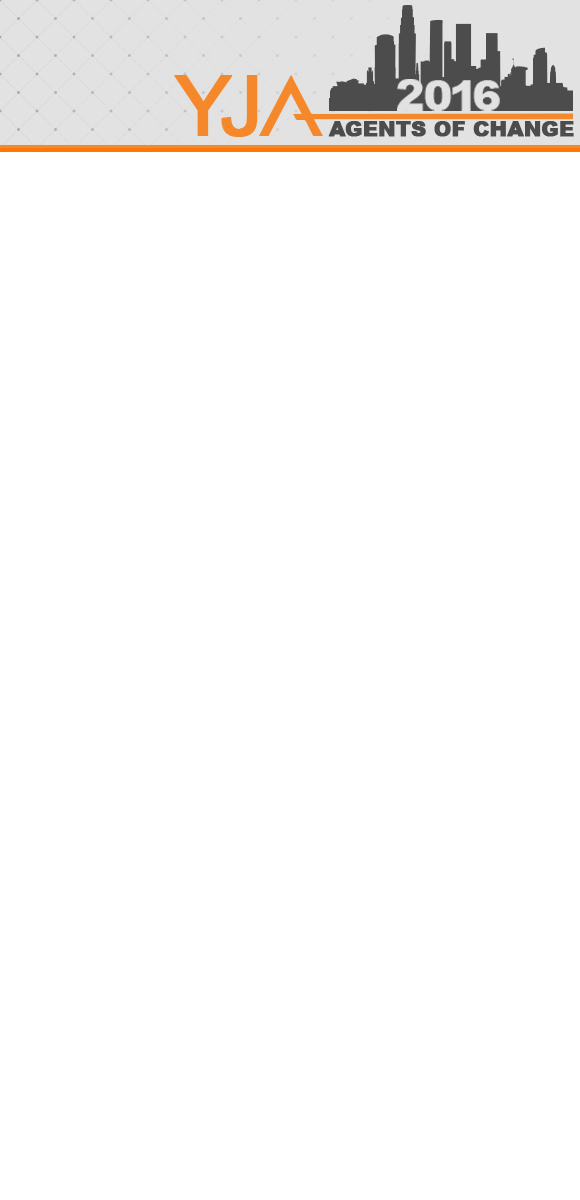
<style>
.page{position:relative;width:580px;height:1200px;background:#ffffff}
.page>*{position:absolute;margin:0}
.t1{font:83.9px "ArialMT";letter-spacing:-0.16em;color:#f6882c;font-weight:bold}
.t2{font:20.2px "Arial-Black";color:#4c4c4d;text-transform:uppercase;font-weight:bold}
</style>
<div class="page">
<p class="t1" style="left:174px;top:75px;width:84px;height:62px">YJ</p>
<p class="t2" style="left:328px;top:121px;width:246px;height:16px">Agents of Change</p>
</div>
